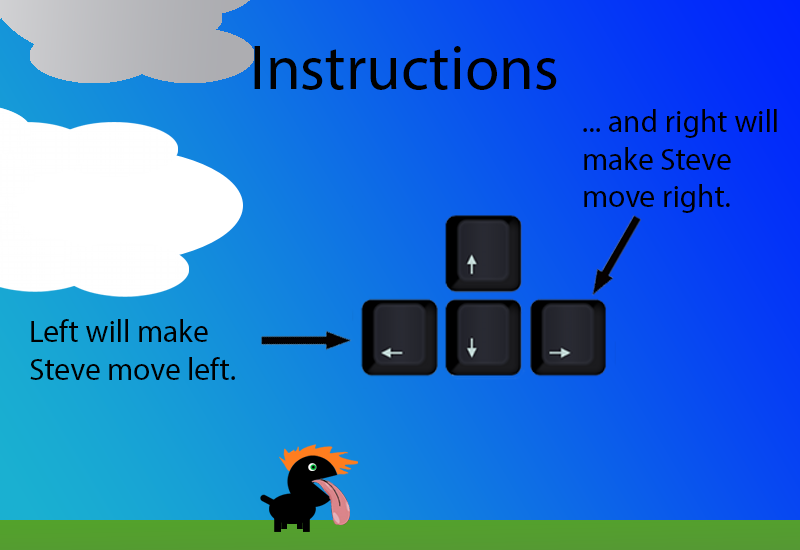
<style>
.page{position:relative;width:800px;height:550px}
.page>*{position:absolute;margin:0}
.t1{font:62.5px "MyriadPro-Regular";color:#000000}
.t2{font:31.2px "MyriadPro-Regular";color:#000000}
</style>
<div class="page">
<p class="t1" style="left:254px;top:46px;width:303px;height:44px">Instructions</p>
<p class="t2" style="left:583px;top:109px;width:194px;height:104px">... and right will make Steve move right.</p>
<p class="t2" style="left:30px;top:319px;width:205px;height:61px">Left will make Steve move left.</p>
</div>
